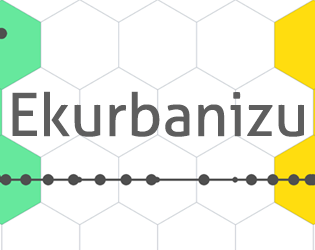
<style>
.page{position:relative;width:315px;height:250px;background:#ffffff}
.page>*{position:absolute;margin:0}
.t1{font:60px "Aller";color:#5e5e5e}
</style>
<div class="page">
<p class="t1" style="left:12px;top:91px;width:292px;height:46px">Ekurbanizu</p>
</div>
